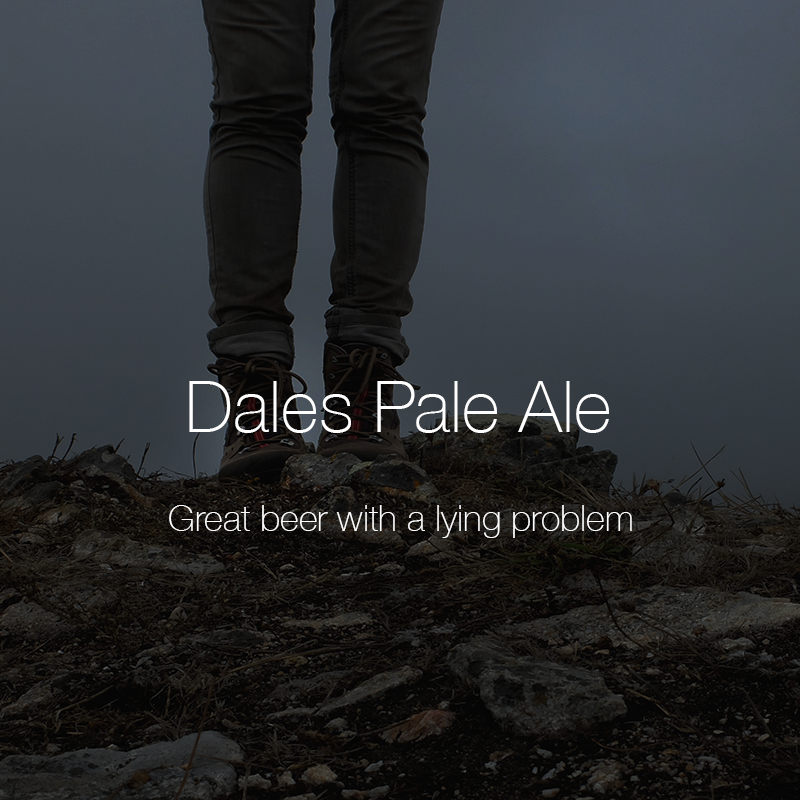
<style>
.page{position:relative;width:800px;height:800px}
.page>*{position:absolute;margin:0}
.t1{font:72px "HelveticaNeue-Thin";color:#ffffff}
.t2{font:36px "HelveticaNeue-Thin";color:#ffffff}
</style>
<div class="page">
<p class="t1" style="left:189px;top:381px;width:420px;height:52px">Dales Pale Ale</p>
<p class="t2" style="left:169px;top:505px;width:463px;height:33px">Great beer with a lying problem</p>
</div>
